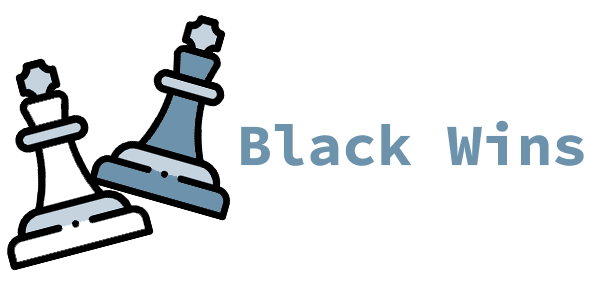
<style>
.page{position:relative;width:600px;height:300px;background:#ffffff}
.page>*{position:absolute;margin:0}
.t1{font:58.3px "SourceCodePro-Bold";color:#6d92ac}
</style>
<div class="page">
<p class="t1" style="left:241px;top:120px;width:343px;height:46px">Black Wins</p>
</div>
